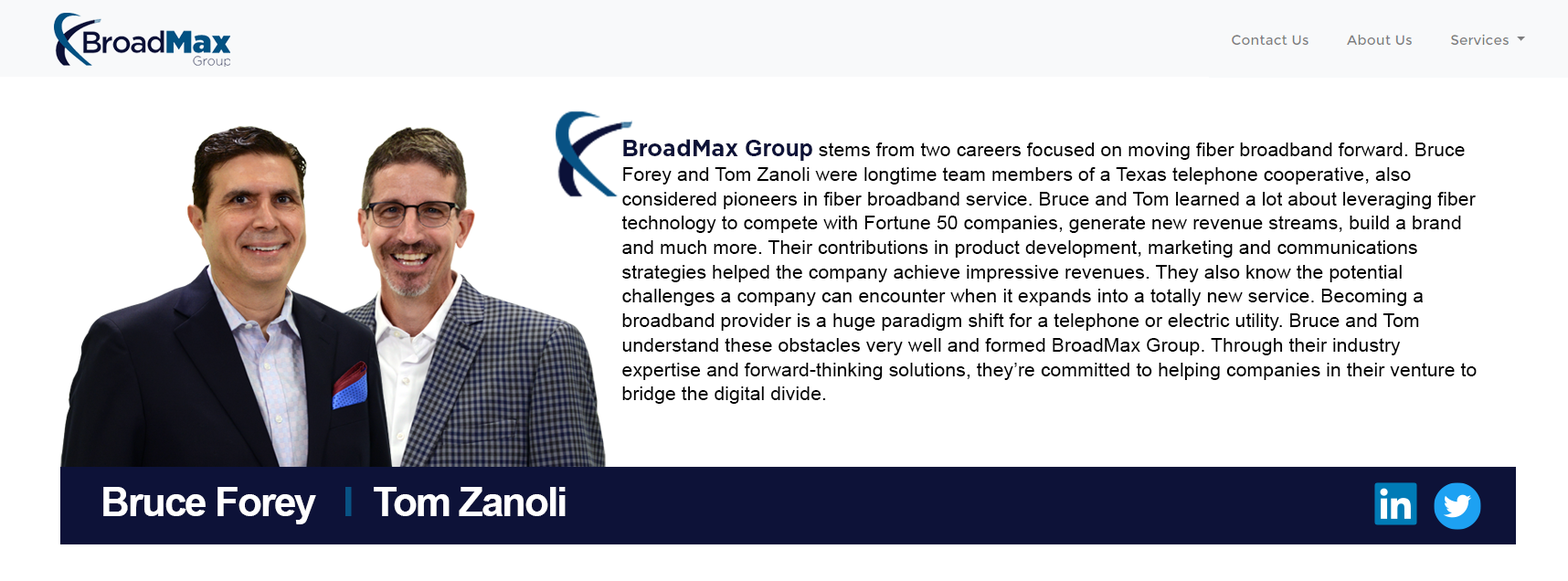
<style>
.page{position:relative;width:1568px;height:581px;background:#ffffff}
.page>*{position:absolute;margin:0}
.t1{font:19.5px/24.4px "ArialMT";color:#000000}
.t2{font:22.8px/24.4px "Gotham-Bold";color:#0d1238}
.t3{font:22.8px/24.4px "Arial-BoldMT";color:#0d1238}
.t4{font:40.6px "Arial-BoldMT";letter-spacing:-0.05em;color:#ffffff}
.t5{font:40.6px "Arial-BoldMT";letter-spacing:-0.05em;color:#085284}
</style>
<div class="page">
<p class="t1" style="left:621px;top:139px;width:856px;height:265px"><span class="t2">BroadMax</span><span class="t3"> Group </span>stems from two careers focused on moving fiber broadband forward. Bruce Forey and Tom Zanoli were longtime team members of a Texas telephone cooperative, also considered pioneers in fiber broadband service. Bruce and Tom learned a lot about leveraging fiber technology to compete with Fortune 50 companies, generate new revenue streams, build a brand and much more. Their contributions in product development, marketing and communications strategies helped the company achieve impressive revenues. They also know the potential challenges a company can encounter when it expands into a totally new service. Becoming a broadband provider is a huge paradigm shift for a telephone or electric utility. Bruce and Tom understand these obstacles very well and formed BroadMax Group. Through their industry expertise and forward-thinking solutions, they’re committed to helping companies in their venture to bridge the digital divide.</p>
<p class="t4" style="left:103px;top:487px;width:249px;height:37px">Bruce Forey   <span class="t5">I</span></p>
<p class="t4" style="left:374px;top:487px;width:192px;height:29px">Tom Zanoli</p>
</div>
